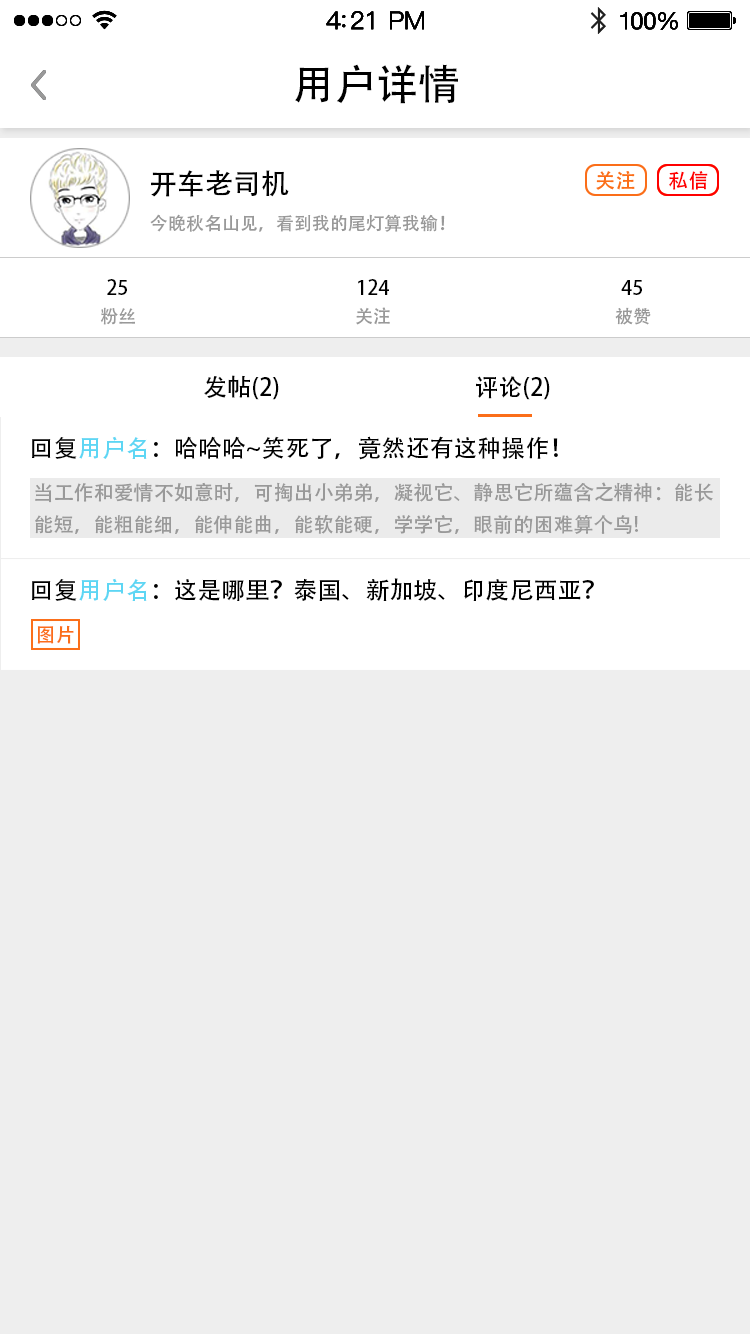
<style>
.page{position:relative;width:750px;height:1334px;background:#eeeeee}
.page>*{position:absolute;margin:0}
.t1{font:42px "AdobeHeitiStd-Regular";color:#000000}
.t2{font:28px "AdobeHeitiStd-Regular";color:#000000}
.t3{font:20px "AdobeHeitiStd-Regular";color:#ff0000}
.t4{font:18px "AdobeHeitiStd-Regular";color:#999999}
.t5{font:20px "AdobeHeitiStd-Regular";color:#000000}
.t6{font:24px "AdobeHeitiStd-Regular";color:#000000}
.t7{font:24px "AdobeHeitiStd-Regular";color:#5dd6f4}
.t8{font:20px/32px "AdobeHeitiStd-Regular";color:#999999}
.t9{font:20px "AdobeHeitiStd-Regular";color:#fb6e19}
</style>
<div class="page">
<p class="t1" style="left:295px;top:64px;width:163px;height:40px">用户详情</p>
<p class="t2" style="left:151px;top:170px;width:138px;height:27px">开车老司机</p>
<p class="t3" style="left:669px;top:171px;width:39px;height:19px">私信</p>
<p class="t4" style="left:150px;top:214px;width:295px;height:18px">今晚秋名山见，看到我的尾灯算我输！</p>
<p class="t5" style="left:107px;top:279px;width:20px;height:16px">25</p>
<p class="t5" style="left:358px;top:279px;width:31px;height:16px">124</p>
<p class="t5" style="left:621px;top:280px;width:21px;height:15px">45</p>
<p class="t4" style="left:100px;top:307px;width:35px;height:18px">粉丝</p>
<p class="t4" style="left:356px;top:307px;width:34px;height:18px">关注</p>
<p class="t4" style="left:615px;top:307px;width:36px;height:18px">被赞</p>
<p class="t6" style="left:204px;top:375px;width:75px;height:25px">发帖(2)</p>
<p class="t6" style="left:476px;top:376px;width:74px;height:24px">评论(2)</p>
<p class="t6" style="left:32px;top:436px;width:526px;height:24px">回复<span class="t7">用户名</span>：哈哈哈~笑死了，竟然还有这种操作！</p>
<p class="t8" style="left:35px;top:482px;width:678px;height:52px">当工作和爱情不如意时，可掏出小弟弟，凝视它、静思它所蕴含之精神：能长<br>能短，能粗能细，能伸能曲，能软能硬，学学它，眼前的困难算个鸟!</p>
<p class="t6" style="left:32px;top:578px;width:562px;height:23px">回复<span class="t7">用户名</span>：这是哪里？泰国、新加坡、印度尼西亚？</p>
<p class="t9" style="left:37px;top:625px;width:37px;height:19px">图片</p>
</div>
